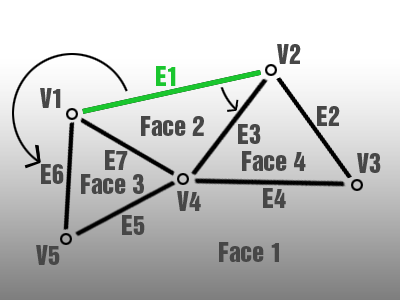
<style>
.page{position:relative;width:400px;height:300px}
.page>*{position:absolute;margin:0}
.t1{font:24px "HelveticaInseratLTStd-Roman";color:#474747}
.t2{font:24px "HelveticaInseratLTStd-Roman";color:#1ac62e}
</style>
<div class="page">
<p class="t1" style="left:277px;top:44px;width:24px;height:20px">V2</p>
<p class="t2" style="left:156px;top:66px;width:20px;height:20px">E1</p>
<p class="t1" style="left:40px;top:88px;width:21px;height:20px">V1</p>
<p class="t1" style="left:317px;top:106px;width:23px;height:20px">E2</p>
<p class="t1" style="left:141px;top:116px;width:63px;height:20px">Face 2</p>
<p class="t1" style="left:238px;top:124px;width:23px;height:20px">E3</p>
<p class="t1" style="left:105px;top:150px;width:23px;height:20px">E7</p>
<p class="t1" style="left:242px;top:151px;width:64px;height:20px">Face 4</p>
<p class="t1" style="left:357px;top:153px;width:24px;height:20px">V3</p>
<p class="t1" style="left:41px;top:164px;width:23px;height:20px">E6</p>
<p class="t1" style="left:81px;top:174px;width:63px;height:20px">Face 3</p>
<p class="t1" style="left:177px;top:191px;width:24px;height:20px">V4</p>
<p class="t1" style="left:263px;top:188px;width:23px;height:20px">E4</p>
<p class="t1" style="left:122px;top:215px;width:23px;height:20px">E5</p>
<p class="t1" style="left:36px;top:245px;width:24px;height:20px">V5</p>
<p class="t1" style="left:219px;top:242px;width:60px;height:20px">Face 1</p>
</div>
